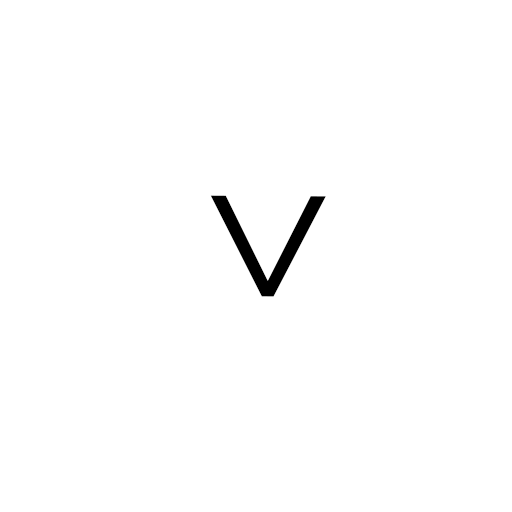
<style>
.page{position:relative;width:512px;height:512px;background:#ffffff}
.page>*{position:absolute;margin:0}
.t1{font:215.9px "MyriadPro-Regular";color:#000000}
</style>
<div class="page">
<p class="t1" style="left:210px;top:195px;width:116px;height:102px;rotate:-90deg">&lt;</p>
</div>
